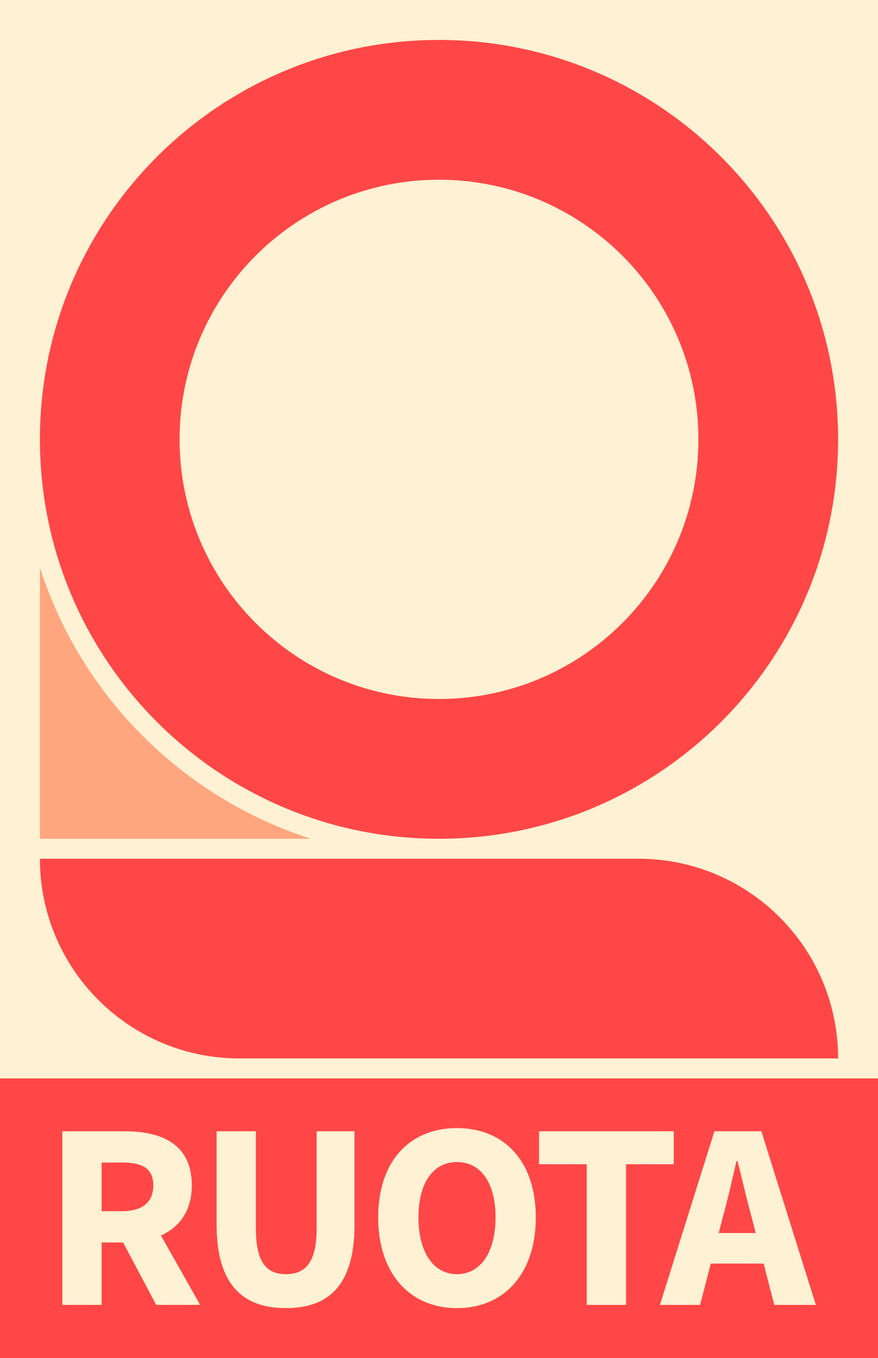
<style>
.page{position:relative;width:878px;height:1358px;background:#ff4747}
.page>*{position:absolute;margin:0}
.t1{font:266.2px "SourceSansRoman-Bold";letter-spacing:-0.03em;color:#fff1d3}
</style>
<div class="page">
<p class="t1" style="left:62px;top:1128px;width:755px;height:180px">RUOTA</p>
</div>
